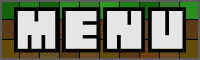
<style>
.page{position:relative;width:200px;height:60px;background:#e5e5e5}
.page>*{position:absolute;margin:0}
.t1{font:55px "Blocked";color:#000000}
</style>
<div class="page">
<p class="t1" style="left:14px;top:7px;width:172px;height:46px">menu</p>
</div>
